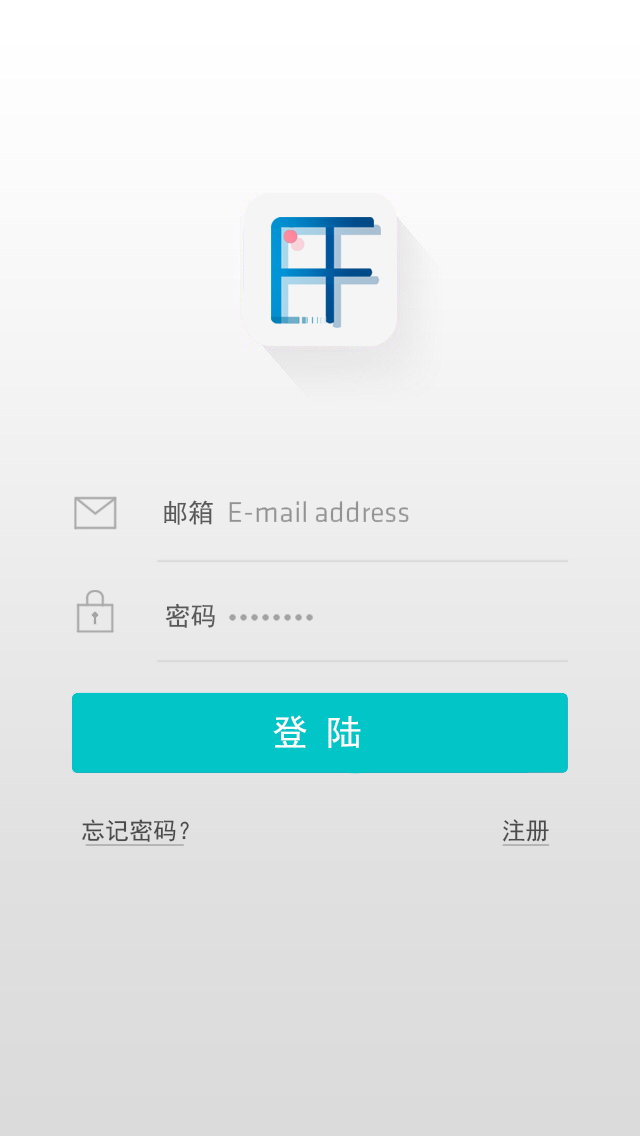
<style>
.page{position:relative;width:640px;height:1136px}
.page>*{position:absolute;margin:0}
.t1{font:26px "SimHei";color:#595959}
.t2{font:36px "SimHei";color:#ffffff}
.t3{font:24px "SimHei";color:#4b4b4b}
</style>
<div class="page">
<p class="t1" style="left:164px;top:500px;width:49px;height:25px">邮箱</p>
<p class="t1" style="left:165px;top:603px;width:50px;height:25px">密码</p>
<p class="t2" style="left:273px;top:715px;width:88px;height:33px">登 陆</p>
<p class="t3" style="left:82px;top:819px;width:107px;height:23px">忘记密码？</p>
<p class="t3" style="left:502px;top:819px;width:47px;height:23px">注册</p>
</div>
